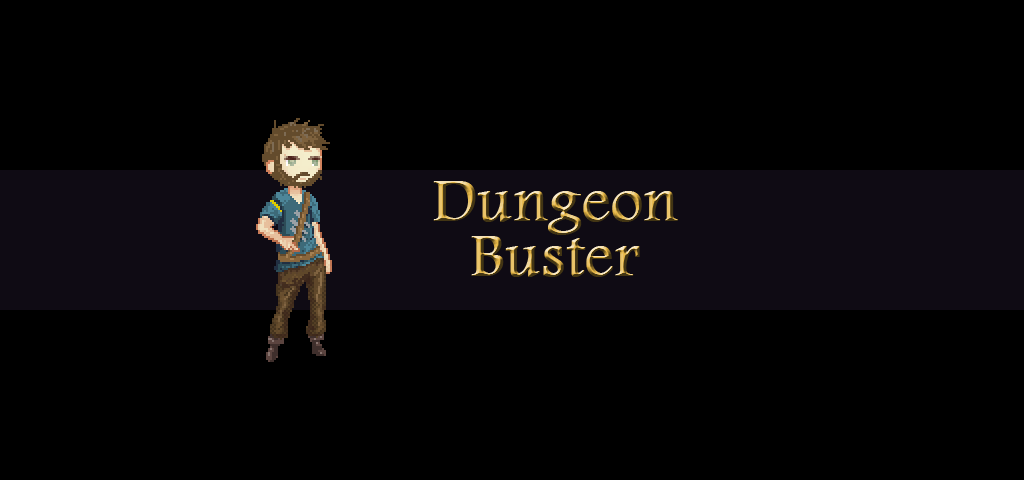
<style>
.page{position:relative;width:1024px;height:480px;background:#000000}
.page>*{position:absolute;margin:0}
.t1{font:62px/55px "Andalus";font-weight:bold}
</style>
<div class="page">
<p class="t1" style="left:433px;top:181px;width:245px;height:96px;text-align:center">Dungeon<br>Buster</p>
</div>
